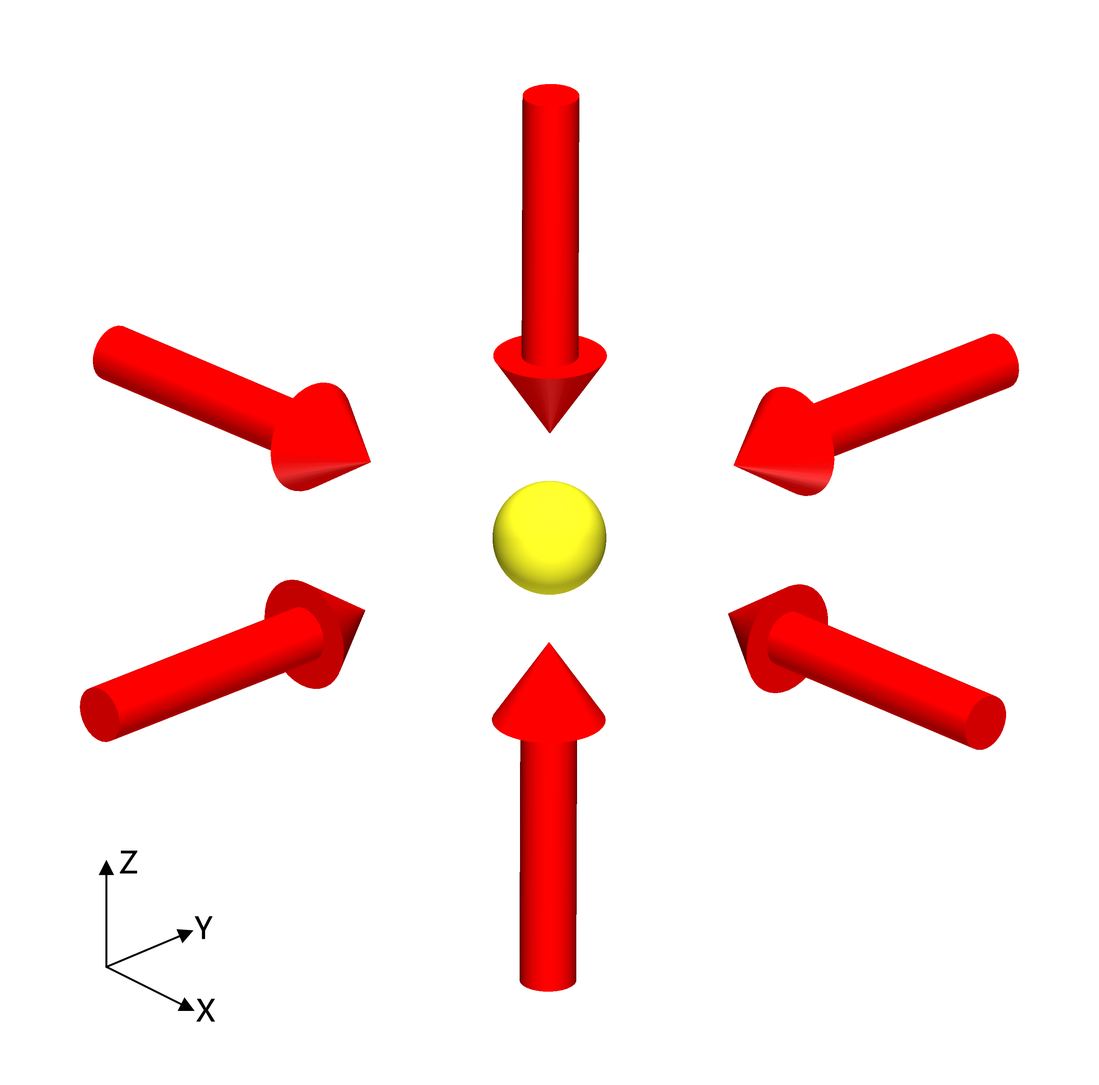
<style>
.page{position:relative;width:1099px;height:1085px;background:#ffffff}
.page>*{position:absolute;margin:0}
.t1{font:30px "MicrosoftYaHeiUI";letter-spacing:-0.02em;color:#000000;font-weight:bold}
</style>
<div class="page">
<p class="t1" style="left:120px;top:850px;width:18px;height:23px">Z</p>
<p class="t1" style="left:195px;top:916px;width:18px;height:23px">Y</p>
<p class="t1" style="left:196px;top:998px;width:19px;height:23px">X</p>
</div>
